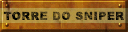
<style>
.page{position:relative;width:128px;height:32px}
.page>*{position:absolute;margin:0}
.t1{font:11.1px "Arial-Black";letter-spacing:0.045em;text-transform:uppercase}
</style>
<div class="page">
<p class="t1" style="left:3px;top:11px;width:121px;height:9px">TORRE DO SNIPER</p>
</div>
